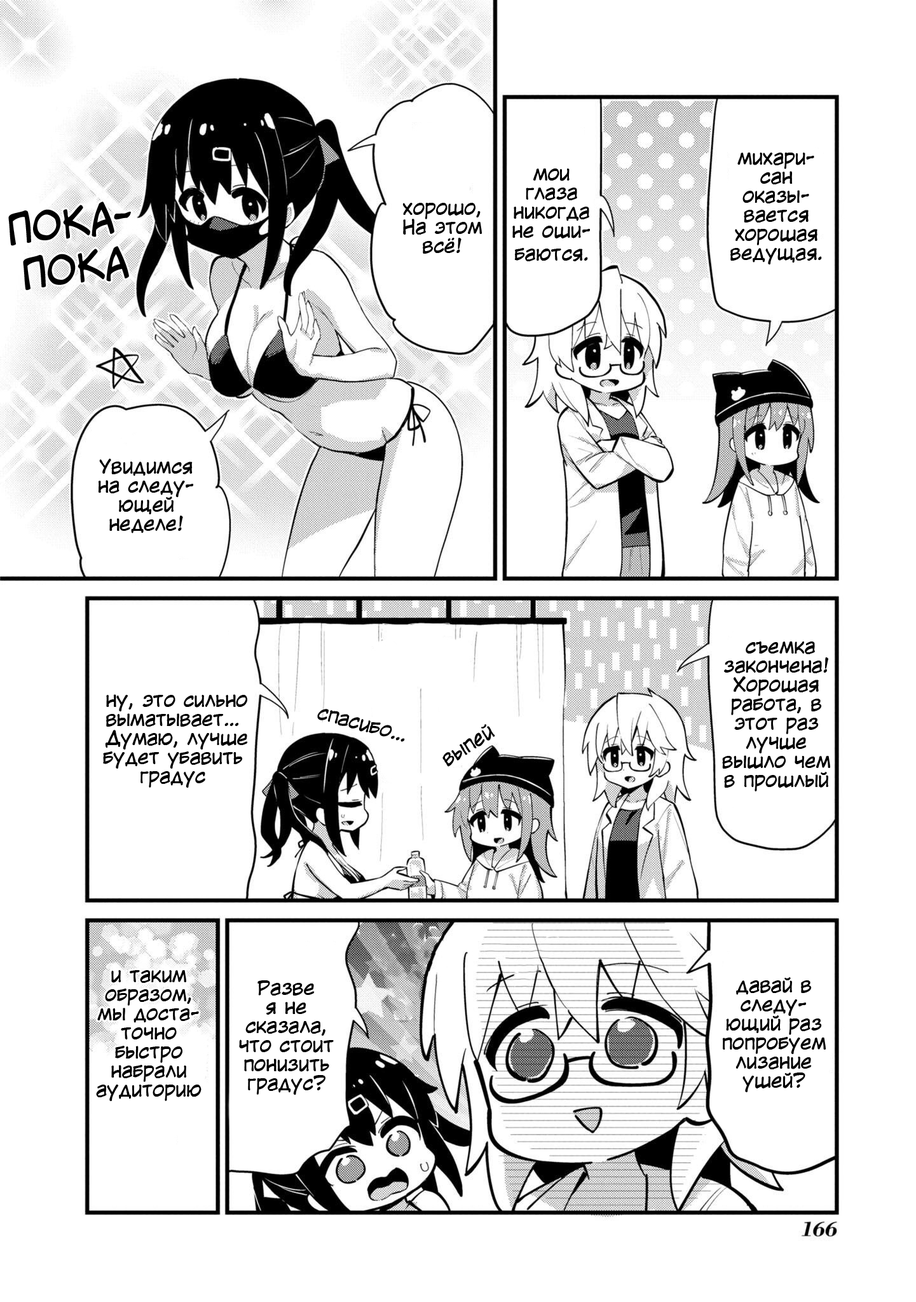
<style>
.page{position:relative;width:916px;height:1302px;background:#ffffff}
.page>*{position:absolute;margin:0}
.t1{font:19.1px/19.1px "KuraiVoice2";color:#000000}
.t2{font:19.1px "KuraiVoice2";color:#000000}
.t3{font:38.1px/45.8px "CCMeanwhile";color:#000000}
</style>
<div class="page">
<p class="t1" style="left:730px;top:152px;width:92px;height:112px;text-align:center">михари-<br>сан<br>оказы-<br>вается хорошая ведущая.</p>
<p class="t1" style="left:512px;top:168px;width:78px;height:93px;text-align:center">мои глаза никогда не оши-<br>баются<span class="t2">.</span></p>
<p class="t3" style="left:8px;top:202px;width:123px;height:88px;text-align:center;rotate:-6deg">ПОКА-<br>ПОКА</p>
<p class="t1" style="left:402px;top:203px;width:80px;height:51px;text-align:center">хорошо,<br>На этом<br>всё!</p>
<p class="t1" style="left:98px;top:458px;width:95px;height:75px;text-align:center">Увидимся<br>на следу-<br>ющей неделе!</p>
<p class="t1" style="left:722px;top:641px;width:108px;height:150px;text-align:center">съемка закончена! Хорошая работа, в этот раз лучше вышло чем в прошлый</p>
<p class="t1" style="left:103px;top:694px;width:145px;height:94px;text-align:center">ну, это сильно выматывает…<br> Думаю, лучше будет убавить градус</p>
<p class="t2" style="left:317px;top:709px;width:88px;height:33px;rotate:15deg">спасибо…</p>
<p class="t2" style="left:442px;top:724px;width:53px;height:43px;rotate:-33deg">выпей</p>
<p class="t1" style="left:96px;top:969px;width:106px;height:132px;text-align:center">и таким<br>образом,<br>мы доста-<br>точно<br>быстро<br>набрали<br>аудиторию</p>
<p class="t1" style="left:722px;top:977px;width:104px;height:115px;text-align:center">давай в следу-<br>ющий раз попробуем лизание ушей?</p>
<p class="t1" style="left:239px;top:980px;width:95px;height:115px;text-align:center">Разве<br>я не сказала, что стоит<br>понизить<br>градус?</p>
</div>
